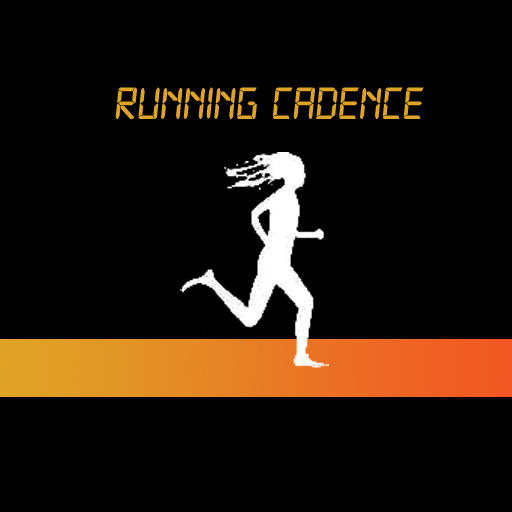
<style>
.page{position:relative;width:512px;height:512px;background:#000000}
.page>*{position:absolute;margin:0}
.t1{font:48px "Digital-7Italic";color:#dfa326}
</style>
<div class="page">
<p class="t1" style="left:115px;top:87px;width:309px;height:32px">Running Cadence</p>
</div>
